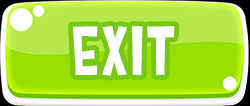
<style>
.page{position:relative;width:250px;height:106px}
.page>*{position:absolute;margin:0}
.t1{font:66.7px "Splat2K";letter-spacing:0.01em;color:#ffffff}
</style>
<div class="page">
<p class="t1" style="left:72px;top:26px;width:103px;height:50px">EXIT</p>
</div>
